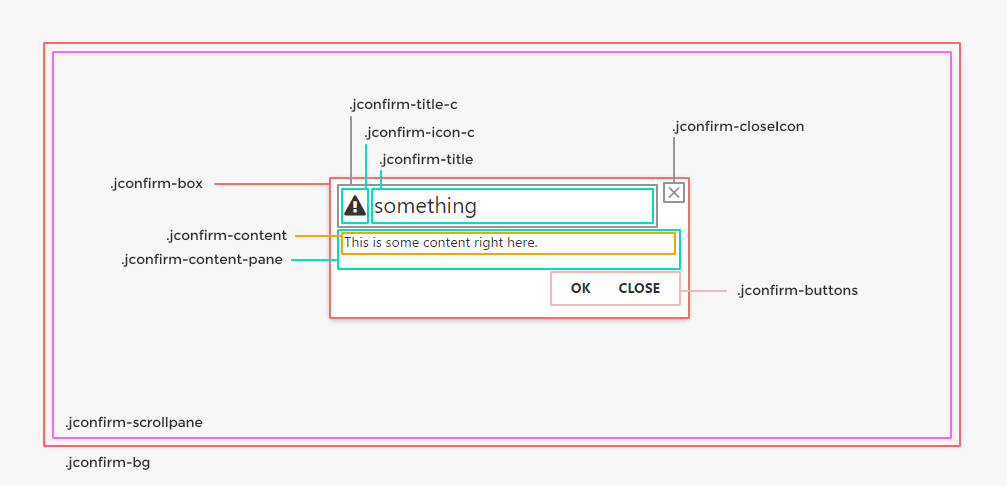
<style>
.page{position:relative;width:1007px;height:486px;background:#f7f7f7}
.page>*{position:absolute;margin:0}
.t1{font:13.6px "Montserrat-Regular";color:#2e2e2e}
</style>
<div class="page">
<p class="t1" style="left:350px;top:98px;width:108px;height:14px">.jconfirm-title-c</p>
<p class="t1" style="left:365px;top:126px;width:110px;height:14px">.jconfirm-icon-c</p>
<p class="t1" style="left:673px;top:120px;width:131px;height:14px">.jconfirm-closeIcon</p>
<p class="t1" style="left:380px;top:153px;width:93px;height:14px">.jconfirm-title</p>
<p class="t1" style="left:111px;top:177px;width:92px;height:14px">.jconfirm-box</p>
<p class="t1" style="left:167px;top:229px;width:120px;height:14px">.jconfirm-content</p>
<p class="t1" style="left:122px;top:253px;width:161px;height:14px">.jconfirm-content-pane</p>
<p class="t1" style="left:738px;top:284px;width:120px;height:14px">.jconfirm-buttons</p>
<p class="t1" style="left:66px;top:416px;width:137px;height:14px">.jconfirm-scrollpane</p>
<p class="t1" style="left:66px;top:456px;width:84px;height:14px">.jconfirm-bg</p>
</div>
